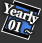
<style>
.page{position:relative;width:42px;height:43px;background:#333333}
.page>*{position:absolute;margin:0}
.t1{font:13px/14px "RyuminPro-ExBold";letter-spacing:-0.08em;color:#ffffff;font-weight:bold}
.t2{font:13px/14px "RyuminPro-ExBold";color:#ffffff;font-weight:bold}
.t3{font:13px/14px "TimesNewRomanPSMT";color:#ffffff;font-weight:bold}
</style>
<div class="page">
<p class="t1" style="left:3px;top:2px;width:36px;height:32px;text-align:center;rotate:19deg">Yearly<br><span class="t2">  01 </span><span class="t3">~</span></p>
</div>
